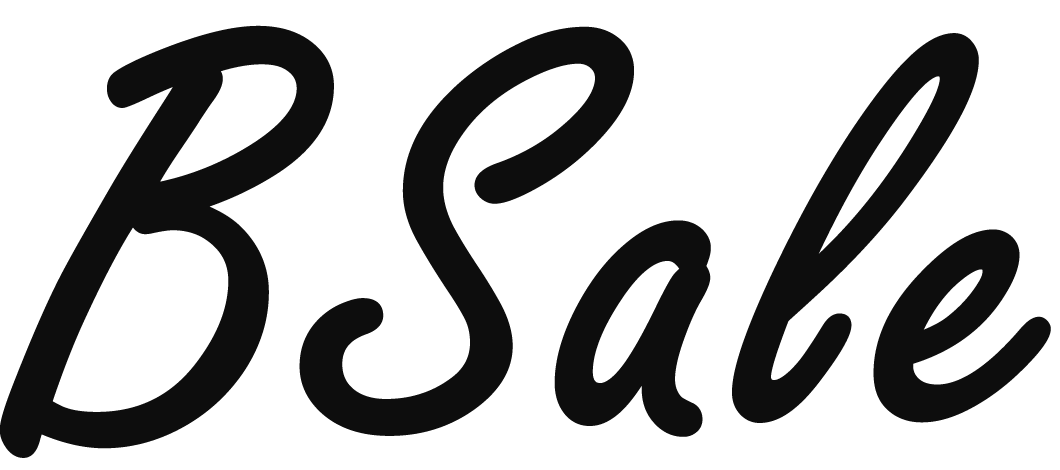
<style>
.page{position:relative;width:1060px;height:470px;background:#ffffff}
.page>*{position:absolute;margin:0}
.t1{font:616.7px "FreestyleScript-Regular";color:#0d0d0d;font-weight:bold}
</style>
<div class="page">
<p class="t1" style="left:0px;top:25px;width:1051px;height:433px">BSale</p>
</div>
